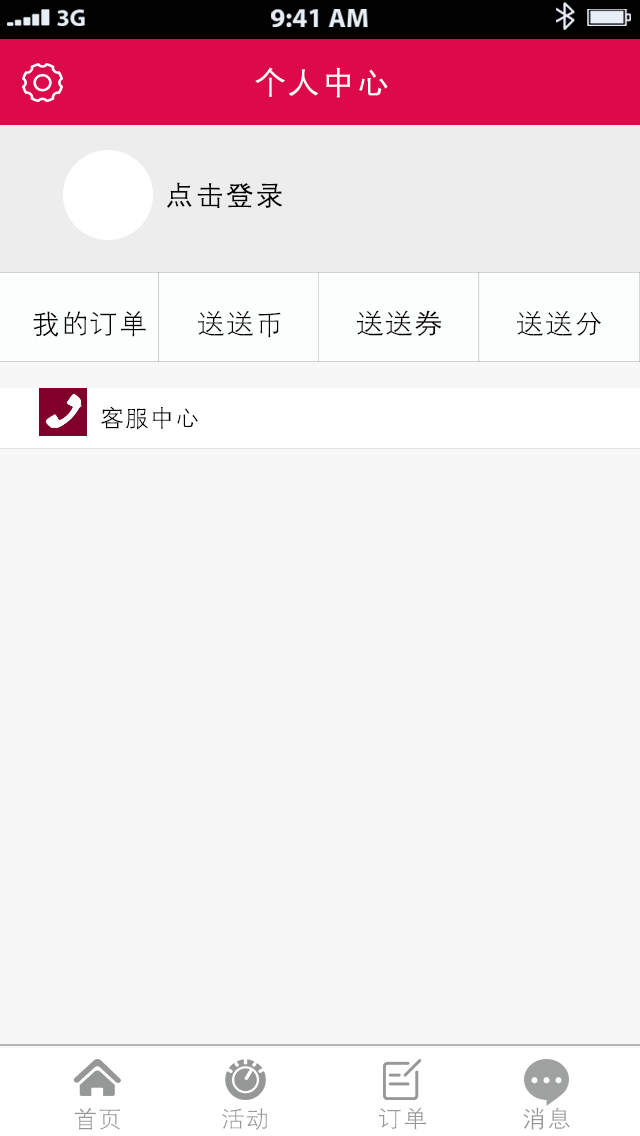
<style>
.page{position:relative;width:640px;height:1136px;background:#f7f7f7}
.page>*{position:absolute;margin:0}
.t1{font:33.3px "FZXH1JW--GB1-0";color:#ffffff;font-weight:bold}
.t2{font:29.2px "FZXH1JW--GB1-0";color:#000001;font-weight:bold}
.t3{font:29.2px "FZXH1JW--GB1-0";color:#000000}
.t4{font:25px "FZXH1JW--GB1-0";color:#000000}
.t5{font:25px "FZXH1JW--GB1-0";color:#969797}
</style>
<div class="page">
<p class="t1" style="left:255px;top:67px;width:133px;height:31px">个人中心</p>
<p class="t2" style="left:167px;top:182px;width:115px;height:26px">点击登录</p>
<p class="t3" style="left:33px;top:311px;width:113px;height:26px">我的订单</p>
<p class="t3" style="left:198px;top:311px;width:83px;height:27px">送送币</p>
<p class="t3" style="left:356px;top:310px;width:86px;height:26px">送送券</p>
<p class="t3" style="left:517px;top:311px;width:85px;height:25px">送送分</p>
<p class="t4" style="left:101px;top:406px;width:97px;height:24px">客服中心</p>
<p class="t5" style="left:74px;top:1108px;width:46px;height:22px">首页</p>
<p class="t5" style="left:222px;top:1108px;width:45px;height:22px">活动</p>
<p class="t5" style="left:379px;top:1107px;width:47px;height:23px">订单</p>
<p class="t5" style="left:523px;top:1107px;width:47px;height:23px">消息</p>
</div>
